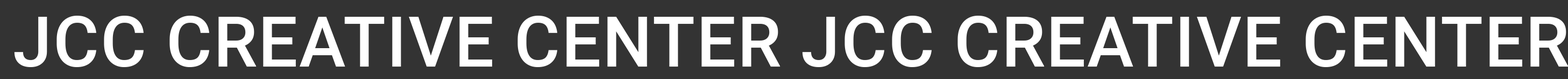
<style>
.page{position:relative;width:1568px;height:79px;background:#333333}
.page>*{position:absolute;margin:0}
.t1{font:69.9px "Roboto-Medium";letter-spacing:0.02em;color:#ffffff}
</style>
<div class="page">
<p class="t1" style="left:14px;top:16px;width:1555px;height:51px">JCC CREATIVE CENTER JCC CREATIVE CENTER</p>
</div>
